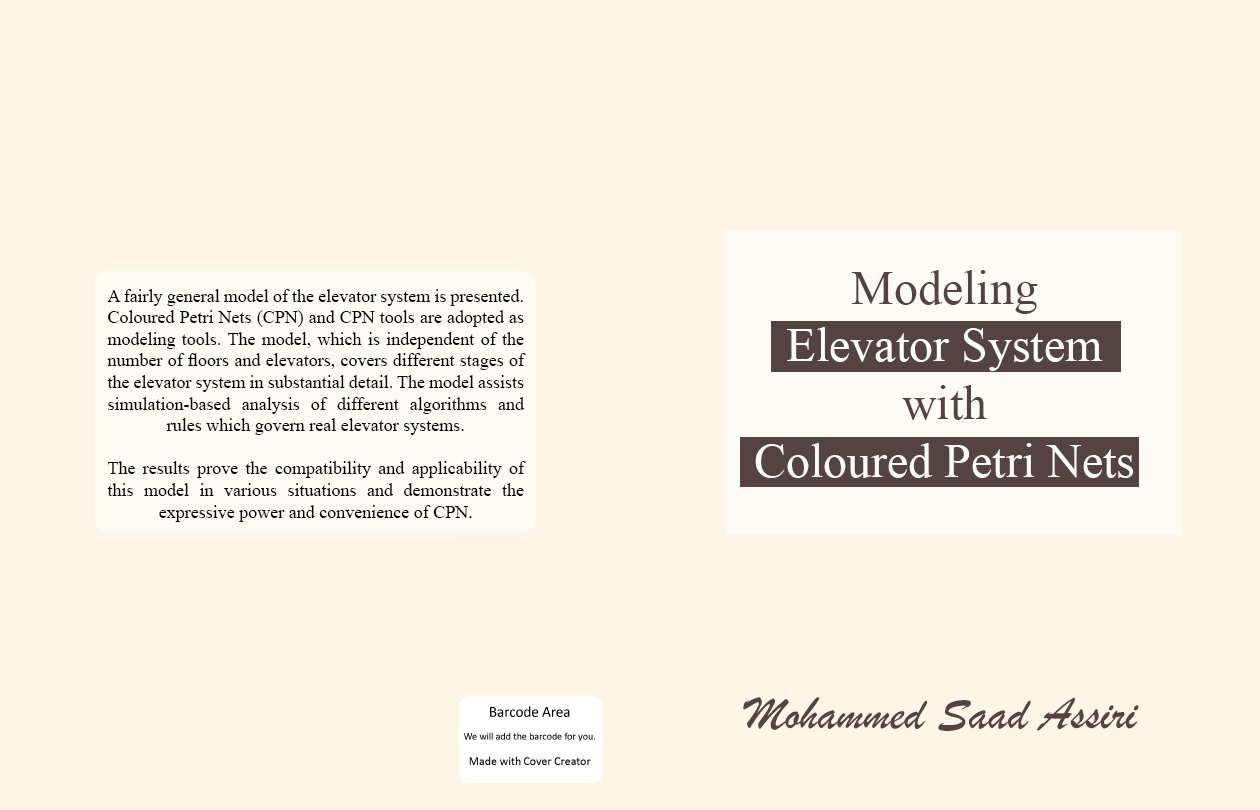
<style>
.page{position:relative;width:1260px;height:810px;background:#fdf6e6}
.page>*{position:absolute;margin:0}
.t1{font:18px "TimesNewRomanPSMT";color:#000000}
.t2{font:48px "BrushScriptMT";color:#554242}
</style>
<div class="page">
<p class="t1" style="left:107px;top:289px;width:419px;height:233px;text-align:justify">A fairly general model of the elevator system is presented. Coloured Petri Nets (CPN) and CPN tools are adopted as modeling tools. The model, which is independent of the number of floors and elevators, covers different stages of the elevator system in substantial detail. The model assists simulation-based analysis of different algorithms and rules which govern real elevator systems. <br><br>The results prove the compatibility and applicability of this model in various situations and demonstrate the expressive power and convenience of CPN.</p>
<p class="t2" style="left:743px;top:697px;width:396px;height:34px">Mohammed Saad Assiri</p>
</div>
